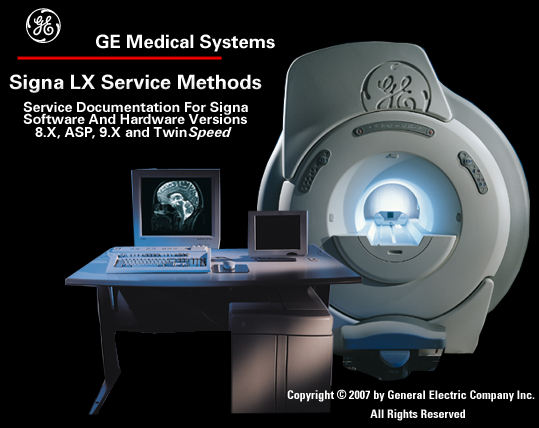
<style>
.page{position:relative;width:539px;height:428px;background:#000000}
.page>*{position:absolute;margin:0}
.t1{font:48px "GELogoFont";color:#ffffff}
.t2{font:18.3px "RegGEsans-Bold";color:#ffffff}
.t3{font:20px "RegGEsans-Bold";color:#ffffff}
.t4{font:14px/12.5px "RegGEsans-Bold";color:#ffffff}
.t5{font:14px/20.8px "RegGEsans-Bold";color:#ffffff}
.t6{font:14px/12.5px "RegGEsans-BoldItalic";color:#ffffff}
.t7{font:12px/19px "ConGEsans-Bold";color:#ffffff}
</style>
<div class="page">
<p class="t1" style="left:26px;top:8px;width:35px;height:35px">e</p>
<p class="t2" style="left:96px;top:34px;width:179px;height:18px">GE Medical Systems</p>
<p class="t3" style="left:9px;top:74px;width:253px;height:19px">Signa LX Service Methods</p>
<p class="t4" style="left:23px;top:101px;width:225px;height:39px"><span class="t5">Service Documentation For Signa</span><br>Software And Hardware Versions<br>   8.X, ASP, 9.X and Twin<span class="t6">Speed</span></p>
<p class="t7" style="left:287px;top:389px;width:248px;height:32px">Copyright © 2007 by General Electric Company Inc.<br>                               All Rights Reserved</p>
</div>
